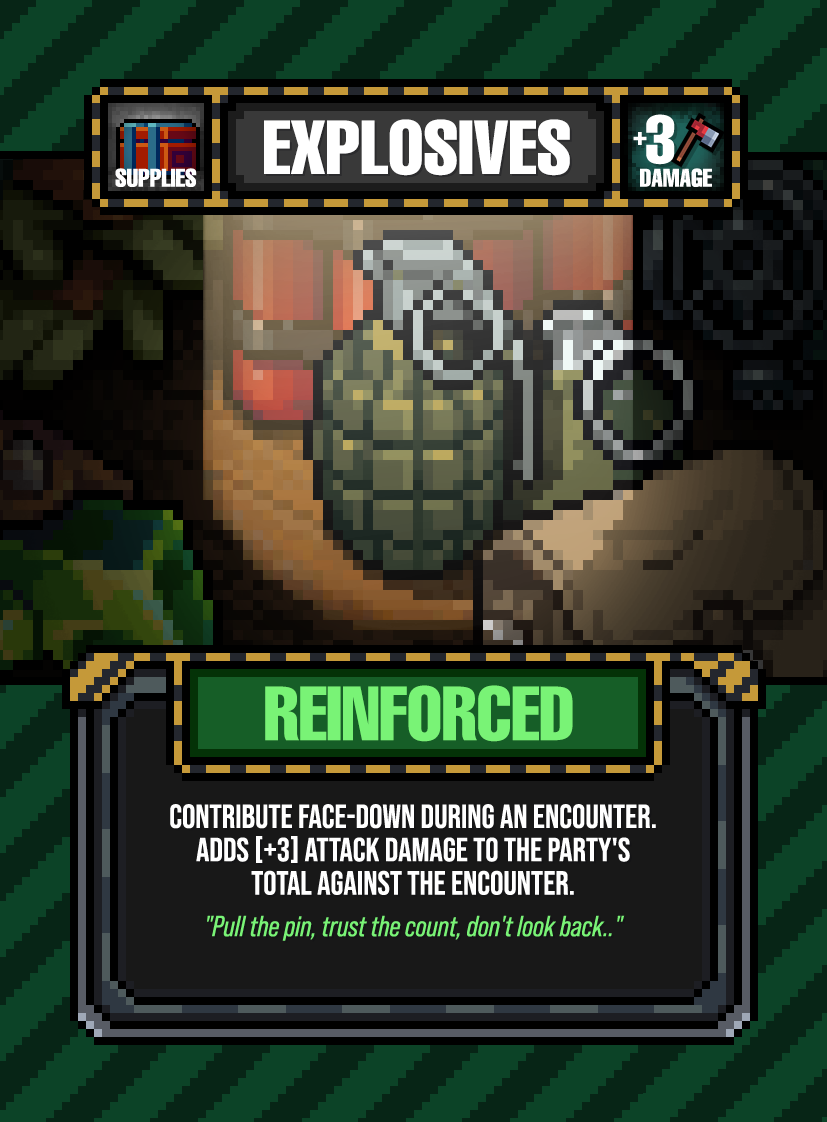
<style>
.page{position:relative;width:827px;height:1122px}
.page>*{position:absolute;margin:0}
.t1{font:75px "HelveticaLTPro-Compressed";color:#ffffff}
.t2{font:75px "HelveticaLTPro-Compressed";color:#79f376}
.t3{font:33.3px/33.3px "BebasNeue-Regular";color:#ffffff}
.t4{font:29.2px/33.3px "BebasNeuePro-Italic";color:#79f376}
</style>
<div class="page">
<p class="t1" style="left:264px;top:119px;width:306px;height:57px">EXPLOSIVES</p>
<p class="t2" style="left:265px;top:685px;width:308px;height:57px">REINFORCED</p>
<p class="t3" style="left:170px;top:804px;width:486px;height:137px;text-align:center">CONTRIBUTE FACE-DOWN DURING AN ENCOUNTER.<br>ADDS [+3] ATTACK DAMAGE TO THE PARTY'S<br>TOTAL AGAINST THE encounter.<br><br><span class="t4">"Pull the pin, trust the count, don't look back.."</span></p>
</div>
